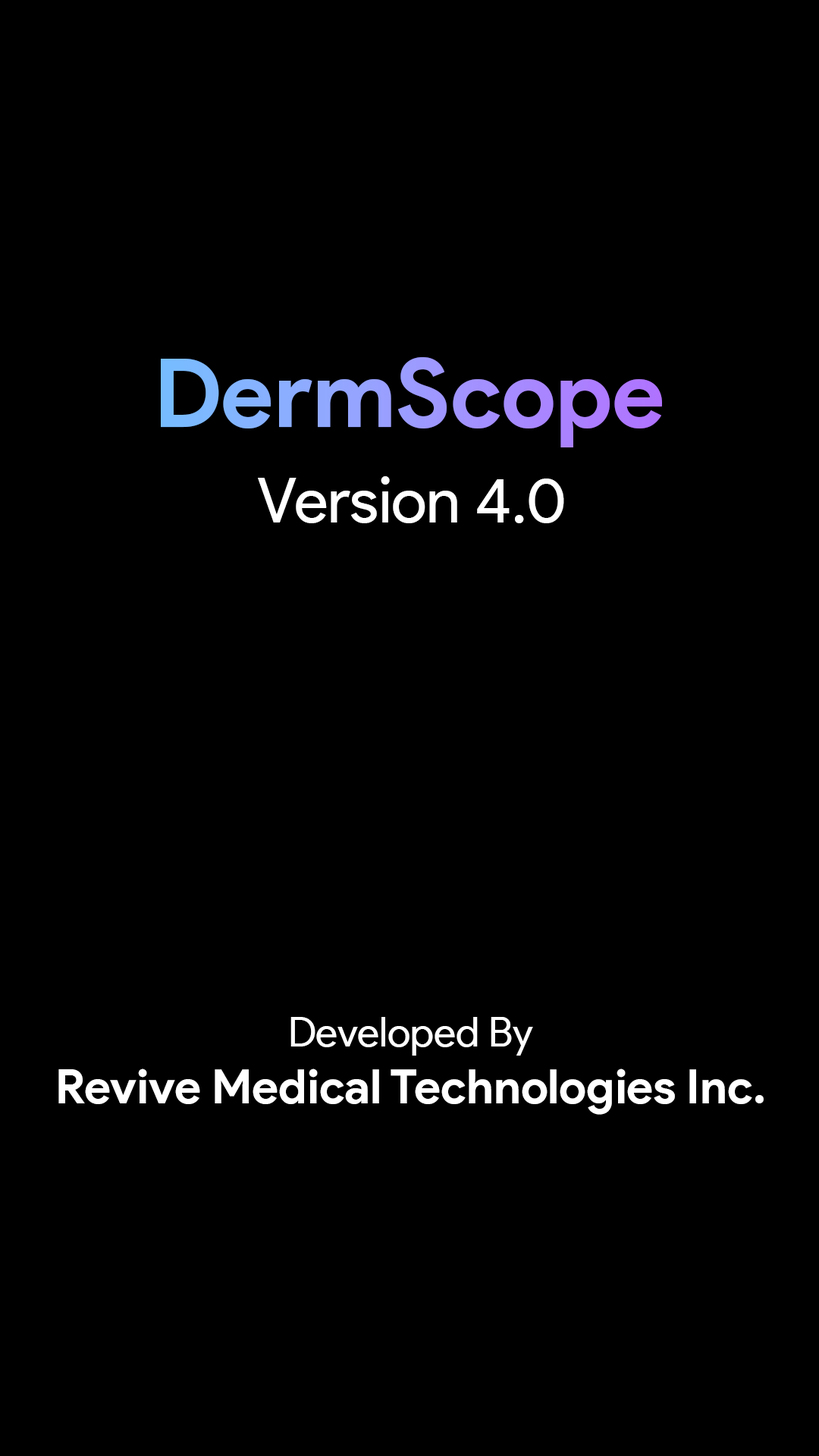
<style>
.page{position:relative;width:819px;height:1456px;background:#000000}
.page>*{position:absolute;margin:0}
.t1{font:94.8px "ProductSans-Bold"}
.t2{font:63.2px "ProductSans-Regular";color:#ffffff}
.t3{font:47.4px "ProductSans-Bold";color:#ffffff}
.t4{font:41.1px "ProductSans-Regular";color:#ffffff}
</style>
<div class="page">
<p class="t1" style="left:161px;top:357px;width:501px;height:90px">DermScope</p>
<p class="t2" style="left:258px;top:476px;width:306px;height:47px">Version 4.0</p>
<p class="t3" style="left:58px;top:1017px;width:706px;height:98px;text-align:center"><span class="t4">Developed By<br></span>Revive Medical Technologies Inc.</p>
</div>
